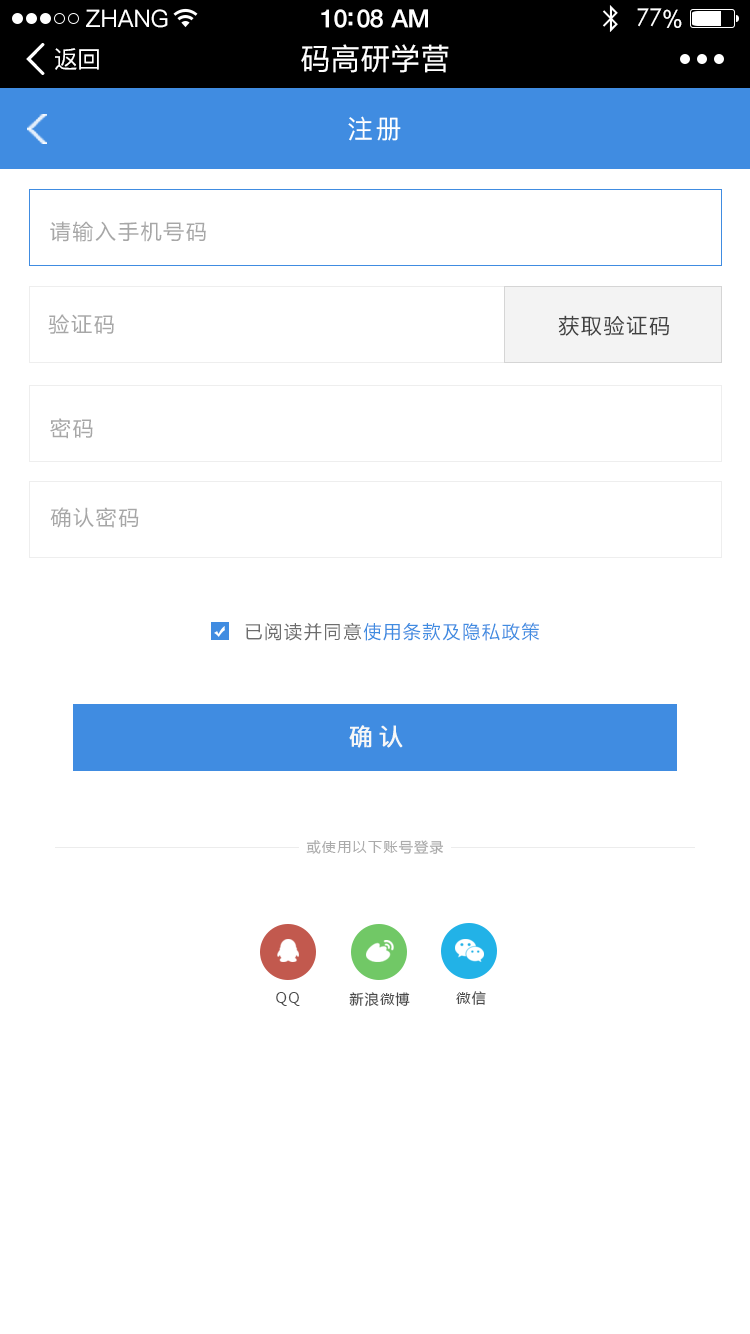
<style>
.page{position:relative;width:750px;height:1334px;background:#ffffff}
.page>*{position:absolute;margin:0}
.t1{font:24px "PingFang-SC-Medium";color:#ffffff}
.t2{font:25px "HelveticaNeue-Medium";letter-spacing:-0.02em;color:#ffffff}
.t3{font:24px "STXihei";letter-spacing:-0.02em;color:#ffffff}
.t4{font:24px "ArialUnicodeMS";letter-spacing:-0.02em;color:#ffffff}
.t5{font:24px "PingFang-SC-Medium";letter-spacing:-0.02em;color:#ffffff}
.t6{font:30px "PingFang-SC-Medium";color:#ffffff}
.t7{font:26px "PingFang-SC-Medium";letter-spacing:0.1em;color:#ffffff}
.t8{font:20.6px "MicrosoftYaHei";letter-spacing:0.1em;color:#a7a7a7}
.t9{font:20.6px "MicrosoftYaHei";letter-spacing:0.1em;color:#424242}
.t10{font:18px "MicrosoftYaHei";letter-spacing:0.1em;color:#408ce1}
.t11{font:18px "MicrosoftYaHei";letter-spacing:0.1em;color:#6d6d6d}
.t12{font:24px "PingFang-SC-Medium";letter-spacing:0.2em;color:#f7f7f7;font-weight:bold}
.t13{font:14px "MicrosoftYaHei";letter-spacing:0.1em;color:#aaaaaa}
.t14{font:14px "MicrosoftYaHei";letter-spacing:0.1em;color:#494949}
</style>
<div class="page">
<p class="t1" style="left:86px;top:9px;width:82px;height:19px">ZHANG</p>
<p class="t2" style="left:321px;top:9px;width:107px;height:19px">10:08 AM</p>
<p class="t3" style="left:637px;top:8px;width:45px;height:20px">77<span class="t4">%</span></p>
<p class="t5" style="left:55px;top:48px;width:44px;height:22px">返回</p>
<p class="t6" style="left:301px;top:44px;width:148px;height:29px">码高研学营</p>
<p class="t7" style="left:348px;top:116px;width:53px;height:25px">注册</p>
<p class="t8" style="left:50px;top:221px;width:156px;height:21px">请输入手机号码</p>
<p class="t8" style="left:48px;top:314px;width:66px;height:20px">验证码</p>
<p class="t9" style="left:558px;top:315px;width:111px;height:21px">获取验证码</p>
<p class="t8" style="left:50px;top:418px;width:43px;height:21px">密码</p>
<p class="t8" style="left:50px;top:507px;width:89px;height:21px">确认密码</p>
<p class="t10" style="left:245px;top:622px;width:295px;height:19px"><span class="t11">已阅读并同意</span>使用条款及隐私政策</p>
<p class="t12" style="left:349px;top:725px;width:54px;height:23px">确认</p>
<p class="t13" style="left:306px;top:840px;width:138px;height:14px">或使用以下账号登录</p>
<p class="t14" style="left:276px;top:992px;width:24px;height:14px">QQ</p>
<p class="t14" style="left:349px;top:992px;width:61px;height:15px">新浪微博</p>
<p class="t14" style="left:456px;top:991px;width:30px;height:14px">微信</p>
</div>
